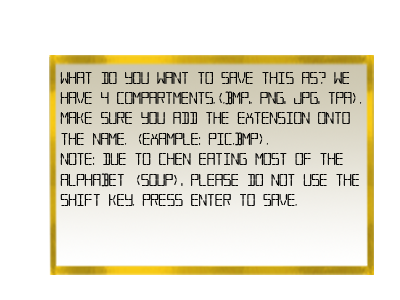
<style>
.page{position:relative;width:400px;height:300px;background:#ffffff}
.page>*{position:absolute;margin:0}
.t1{font:17px "TransponderAOE";color:#030303}
</style>
<div class="page">
<p class="t1" style="left:60px;top:72px;width:302px;height:134px">What do you want to save this as? We <br>have 4 compartments.(.bmp,. png, jpg, tpa). <br>Make sure you Add the extension onto <br>the name. (example: pic.bmp).<br>NOTE: Due to Chen eating most of the<br>alphabet (soup), please do not use the<br>shift key. Press Enter to Save.</p>
</div>
